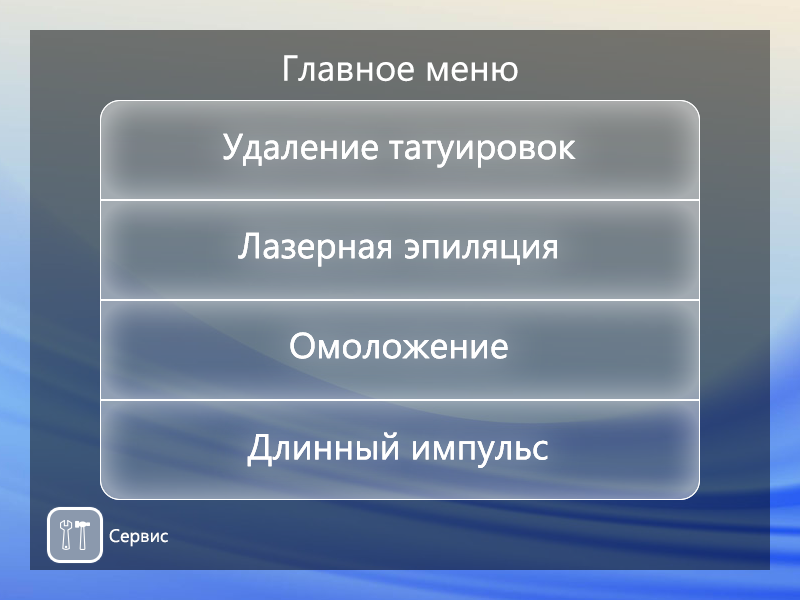
<style>
.page{position:relative;width:800px;height:600px}
.page>*{position:absolute;margin:0}
.t1{font:36px "SegoeUI";color:#ffffff}
.t2{font:18px "SegoeUI";color:#ffffff}
</style>
<div class="page">
<p class="t1" style="left:284px;top:55px;width:234px;height:27px">Главное меню</p>
<p class="t1" style="left:223px;top:133px;width:353px;height:35px">Удаление татуировок</p>
<p class="t1" style="left:223px;top:133px;width:353px;height:35px">Удаление татуировок</p>
<p class="t1" style="left:238px;top:232px;width:319px;height:35px">Лазерная эпиляция</p>
<p class="t1" style="left:238px;top:232px;width:319px;height:35px">Лазерная эпиляция</p>
<p class="t1" style="left:290px;top:332px;width:218px;height:27px">Омоложение</p>
<p class="t1" style="left:290px;top:332px;width:218px;height:27px">Омоложение</p>
<p class="t1" style="left:247px;top:432px;width:301px;height:36px">Длинный импульс</p>
<p class="t1" style="left:247px;top:432px;width:301px;height:36px">Длинный импульс</p>
<p class="t2" style="left:109px;top:529px;width:59px;height:18px">Сервис</p>
</div>
